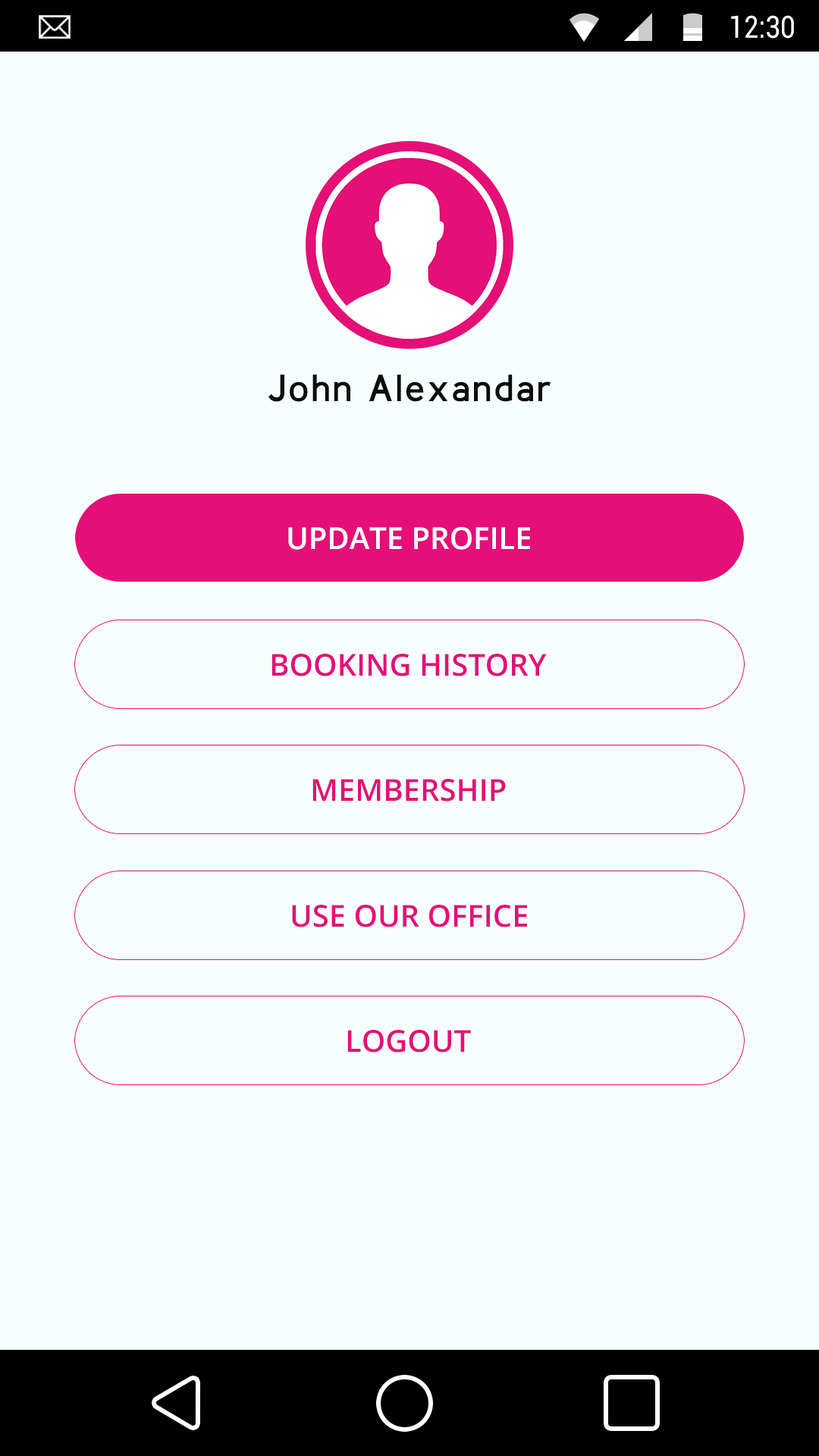
<style>
.page{position:relative;width:819px;height:1456px;background:#f7fffe}
.page>*{position:absolute;margin:0}
.t1{font:30.5px "Roboto-Regular";color:#ffffff;scale:0.87 1}
.t2{font:37.9px "BerlinBold";letter-spacing:0.1em;color:#0c0c0c}
.t3{font:30.3px "OpenSans-Semibold";color:#ffffff}
.t4{font:30.3px "OpenSans-Semibold";color:#e41077}
</style>
<div class="page">
<p class="t1" style="left:731px;top:15px;width:63px;height:24px">12:30</p>
<p class="t2" style="left:268px;top:375px;width:283px;height:27px">John Alexandar</p>
<p class="t3" style="left:288px;top:527px;width:242px;height:23px">UPDATE PROFILE</p>
<p class="t4" style="left:271px;top:654px;width:276px;height:22px">BOOKING HISTORY</p>
<p class="t4" style="left:312px;top:779px;width:194px;height:23px">MEMBERSHIP</p>
<p class="t4" style="left:292px;top:905px;width:235px;height:22px">USE OUR OFFICE</p>
<p class="t4" style="left:347px;top:1030px;width:124px;height:23px">LOGOUT</p>
</div>
